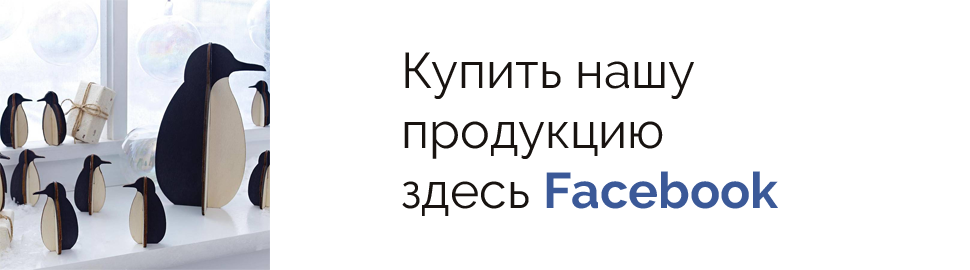
<style>
.page{position:relative;width:970px;height:270px;background:#ffffff}
.page>*{position:absolute;margin:0}
.t1{font:50px "Raleway-Regular";color:#181310}
.t2{font:50px "Raleway-Bold";color:#3b5998}
</style>
<div class="page">
<p class="t1" style="left:402px;top:52px;width:376px;height:164px">Купить нашу<br>продукцию<br>здесь <span class="t2">Facebook</span></p>
</div>
